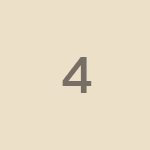
<style>
.page{position:relative;width:150px;height:150px;background:#ede0c8}
.page>*{position:absolute;margin:0}
.t1{font:52.9px "ClearSans-Medium";color:#776e65}
</style>
<div class="page">
<p class="t1" style="left:62px;top:57px;width:30px;height:36px">4</p>
</div>
